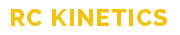
<style>
.page{position:relative;width:180px;height:35px;background:#ffffff}
.page>*{position:absolute;margin:0}
.t1{font:24px "Raleway-ExtraBold";letter-spacing:0.05em;color:#f1c40f}
</style>
<div class="page">
<p class="t1" style="left:11px;top:9px;width:156px;height:17px">RC KINETICS</p>
</div>
